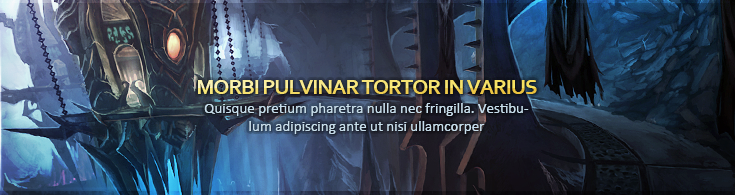
<style>
.page{position:relative;width:735px;height:195px}
.page>*{position:absolute;margin:0}
.t1{font:22px "Corbel-Bold";letter-spacing:-0.05em;text-transform:uppercase}
.t2{font:15px "Calibri";color:#c8deeb}
</style>
<div class="page">
<p class="t1" style="left:198px;top:80px;width:339px;height:14px">Morbi pulvinar tortor in varius</p>
<p class="t1" style="left:198px;top:80px;width:339px;height:14px">Morbi pulvinar tortor in varius</p>
<p class="t2" style="left:204px;top:103px;width:325px;height:31px;text-align:center">Quisque pretium pharetra nulla nec fringilla. Vestibulum adipiscing ante ut nisi ullamcorper</p>
<p class="t2" style="left:204px;top:103px;width:325px;height:31px;text-align:center">Quisque pretium pharetra nulla nec fringilla. Vestibulum adipiscing ante ut nisi ullamcorper</p>
</div>
